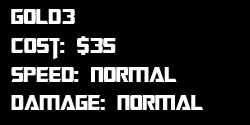
<style>
.page{position:relative;width:250px;height:125px;background:#000000}
.page>*{position:absolute;margin:0}
.t1{font:24px "TransformersMovie";color:#ffffff}
</style>
<div class="page">
<p class="t1" style="left:11px;top:9px;width:192px;height:101px">gold3<br>Cost: $35<br>Speed: Normal<br>Damage: Normal</p>
</div>
